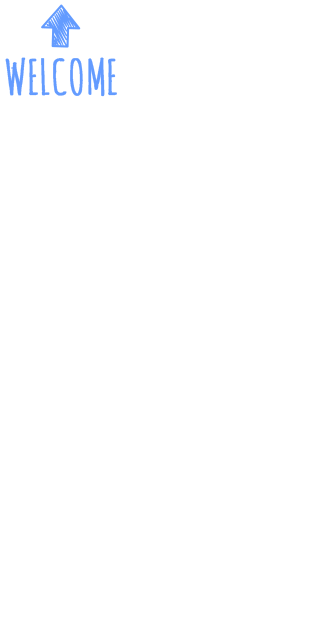
<style>
.page{position:relative;width:320px;height:640px;background:#ffffff}
.page>*{position:absolute;margin:0}
.t1{font:46.6px "AmaticSC-Regular";color:#639bff;font-weight:bold}
</style>
<div class="page">
<p class="t1" style="left:5px;top:57px;width:112px;height:40px">WELCOME</p>
</div>
